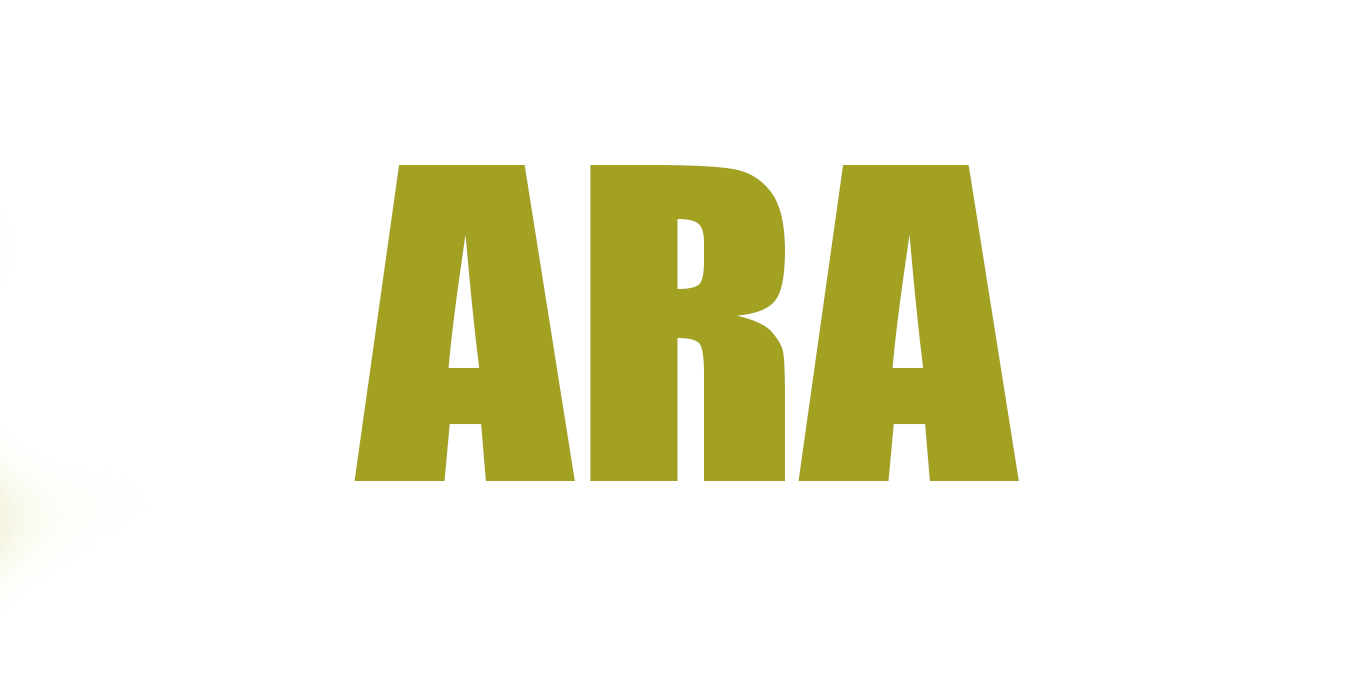
<style>
.page{position:relative;width:1362px;height:700px;background:#ffffff}
.page>*{position:absolute;margin:0}
.t1{font:400.4px "Impact";color:#a3a121;scale:1.06 1}
</style>
<div class="page">
<p class="t1" style="left:354px;top:165px;width:665px;height:316px">ARA</p>
</div>
